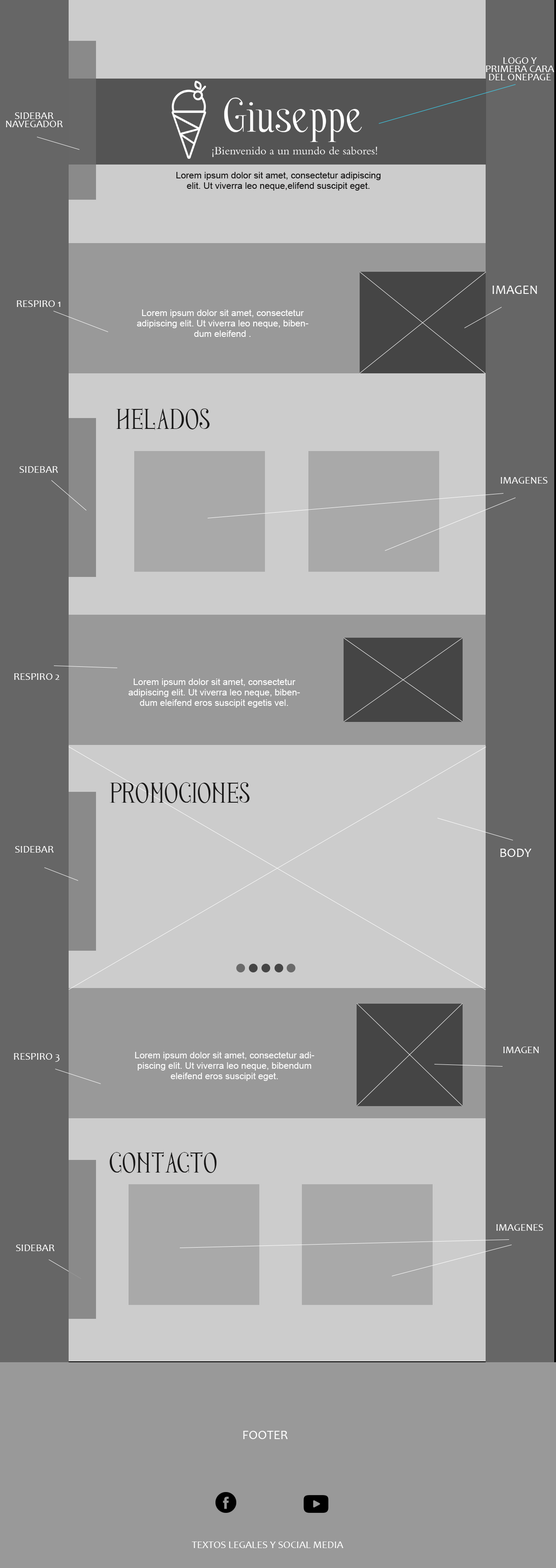
<style>
.page{position:relative;width:556px;height:1568px;background:#cccccc}
.page>*{position:absolute;margin:0}
.t1{font:10.4px/8.3px "Candara";color:#ffffff}
.t2{font:13px "Candara";color:#ffffff}
.t3{font:10.4px "Candara";color:#ffffff}
.t4{font:44.3px "Nerea";color:#181717}
</style>
<div class="page">
<p class="t1" style="left:486px;top:57px;width:68px;height:23px;text-align:center">LOGO Y PRIMERA CARA DEL ONEPAGE</p>
<p class="t1" style="left:6px;top:112px;width:57px;height:15px;text-align:center">SIDEBAR<br>NAVEGADOR</p>
<p class="t2" style="left:492px;top:286px;width:45px;height:8px">IMAGEN</p>
<p class="t3" style="left:17px;top:300px;width:43px;height:7px">RESPIRO 1</p>
<p class="t4" style="left:116px;top:408px;width:94px;height:22px">HELADOS</p>
<p class="t3" style="left:20px;top:466px;width:38px;height:7px">SIDEBAR</p>
<p class="t3" style="left:501px;top:477px;width:46px;height:7px">IMAGENES</p>
<p class="t3" style="left:14px;top:673px;width:45px;height:7px">RESPIRO 2</p>
<p class="t4" style="left:110px;top:782px;width:140px;height:22px">PROMOCIONES</p>
<p class="t3" style="left:15px;top:846px;width:39px;height:7px">SIDEBAR</p>
<p class="t2" style="left:500px;top:849px;width:31px;height:8px">BODY</p>
<p class="t3" style="left:503px;top:1047px;width:35px;height:6px">IMAGEN</p>
<p class="t3" style="left:14px;top:1053px;width:45px;height:9px">RESPIRO 3</p>
<p class="t4" style="left:109px;top:1152px;width:108px;height:21px">CONTACTO</p>
<p class="t3" style="left:496px;top:1224px;width:47px;height:7px">IMAGENES</p>
<p class="t3" style="left:16px;top:1245px;width:39px;height:6px">SIDEBAR</p>
<p class="t2" style="left:243px;top:1431px;width:45px;height:8px">FOOTER</p>
<p class="t3" style="left:191px;top:1542px;width:152px;height:6px">TEXTOS LEGALES Y SOCIAL MEDIA</p>
</div>
